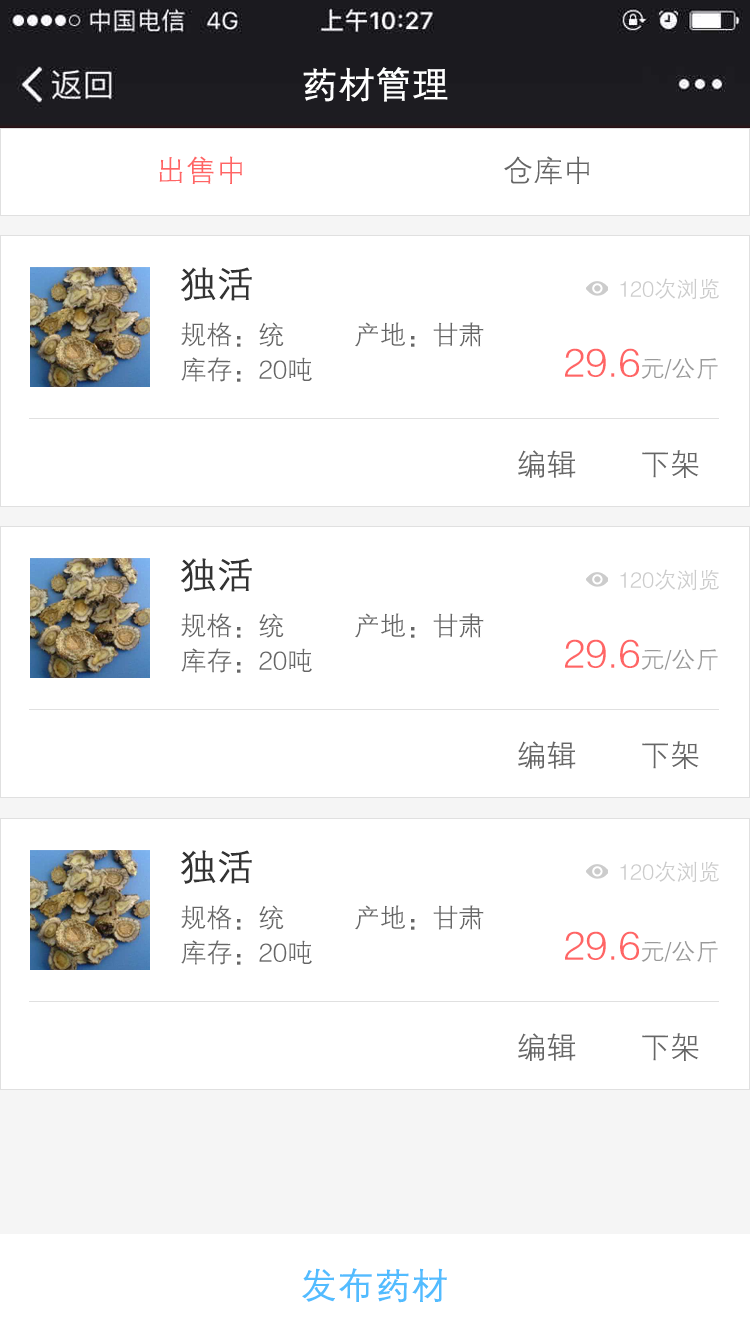
<style>
.page{position:relative;width:750px;height:1334px;background:#ffffff}
.page>*{position:absolute;margin:0}
.t1{font:36px "FZZDXJW--GB1-0";color:#ffffff;font-weight:bold}
.t2{font:30px "FZZDXJW--GB1-0";color:#ff6565}
.t3{font:30px "FZZDXJW--GB1-0";color:#666666}
.t4{font:36px "FZZDXJW--GB1-0";color:#333333;font-weight:bold}
.t5{font:22px "FZZDXJW--GB1-0";color:#cccccc}
.t6{font:26px "FZZDXJW--GB1-0";color:#666666}
.t7{font:40px "FZZDXJW--GB1-0";color:#ff6565}
.t8{font:24px "FZZDXJW--GB1-0";color:#999999}
.t9{font:36px "FZZDXJW--GB1-0";color:#52bcff;font-weight:bold}
</style>
<div class="page">
<p class="t1" style="left:303px;top:67px;width:145px;height:35px">药材管理</p>
<p class="t2" style="left:159px;top:156px;width:83px;height:28px">出售中</p>
<p class="t3" style="left:504px;top:156px;width:85px;height:29px">仓库中</p>
<p class="t4" style="left:181px;top:267px;width:71px;height:34px">独活</p>
<p class="t5" style="left:620px;top:278px;width:99px;height:22px">120次浏览</p>
<p class="t6" style="left:181px;top:322px;width:103px;height:25px">规格：统</p>
<p class="t6" style="left:355px;top:322px;width:129px;height:25px">产地：甘肃</p>
<p class="t7" style="left:565px;top:348px;width:153px;height:32px">29.6<span class="t8">元/公斤</span></p>
<p class="t6" style="left:181px;top:357px;width:131px;height:25px">库存：20吨</p>
<p class="t3" style="left:518px;top:450px;width:58px;height:28px">编辑</p>
<p class="t3" style="left:642px;top:450px;width:57px;height:28px">下架</p>
<p class="t4" style="left:181px;top:558px;width:71px;height:34px">独活</p>
<p class="t5" style="left:620px;top:569px;width:99px;height:22px">120次浏览</p>
<p class="t6" style="left:181px;top:613px;width:103px;height:25px">规格：统</p>
<p class="t6" style="left:355px;top:613px;width:129px;height:25px">产地：甘肃</p>
<p class="t7" style="left:565px;top:639px;width:153px;height:32px">29.6<span class="t8">元/公斤</span></p>
<p class="t6" style="left:181px;top:648px;width:131px;height:25px">库存：20吨</p>
<p class="t3" style="left:518px;top:741px;width:58px;height:28px">编辑</p>
<p class="t3" style="left:642px;top:741px;width:57px;height:28px">下架</p>
<p class="t4" style="left:181px;top:850px;width:71px;height:34px">独活</p>
<p class="t5" style="left:620px;top:861px;width:99px;height:22px">120次浏览</p>
<p class="t6" style="left:181px;top:905px;width:103px;height:25px">规格：统</p>
<p class="t6" style="left:355px;top:905px;width:129px;height:25px">产地：甘肃</p>
<p class="t6" style="left:181px;top:940px;width:131px;height:25px">库存：20吨</p>
<p class="t7" style="left:565px;top:931px;width:153px;height:32px">29.6<span class="t8">元/公斤</span></p>
<p class="t3" style="left:518px;top:1033px;width:58px;height:28px">编辑</p>
<p class="t3" style="left:642px;top:1033px;width:57px;height:28px">下架</p>
<p class="t9" style="left:302px;top:1268px;width:145px;height:35px">发布药材</p>
</div>
